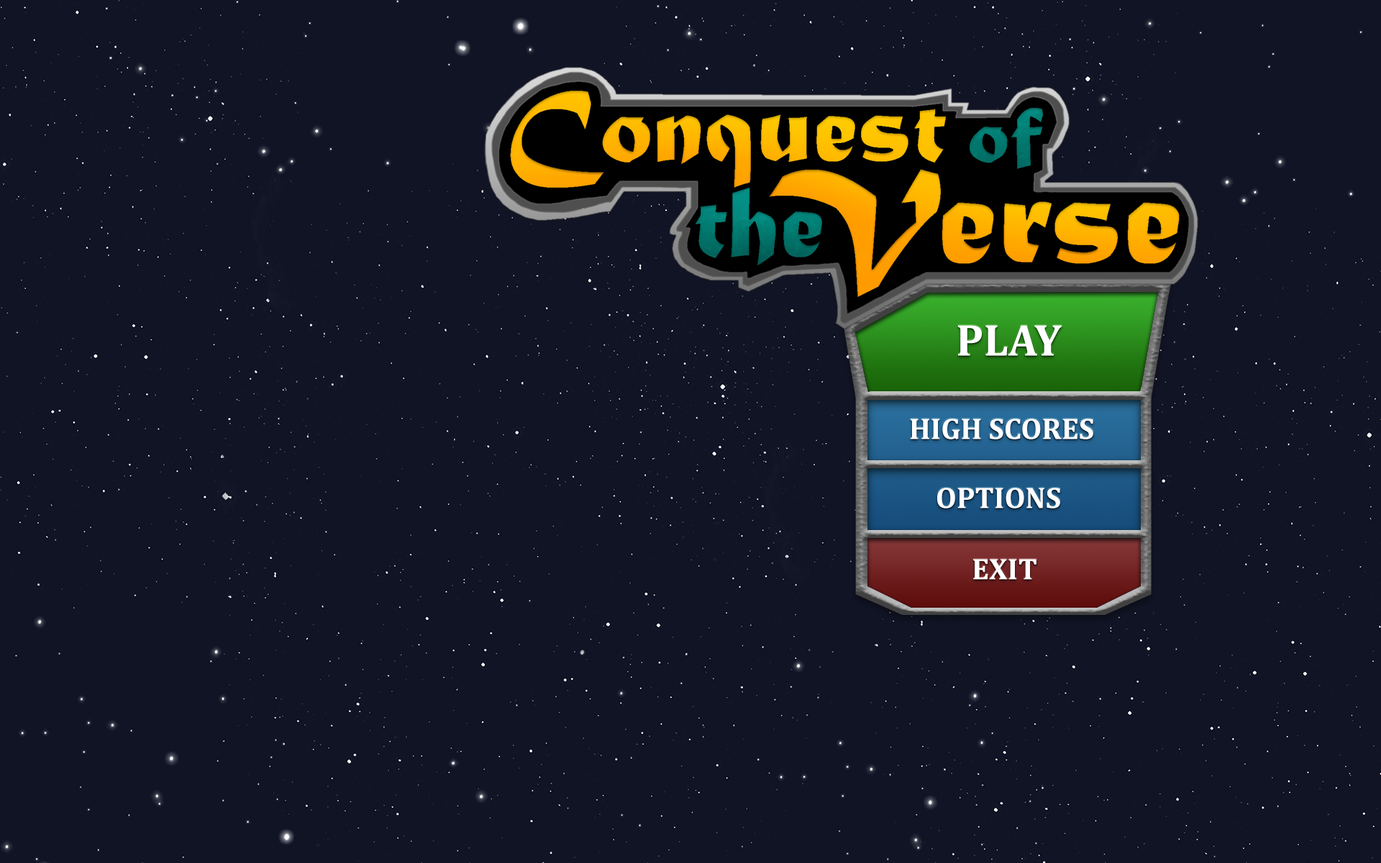
<style>
.page{position:relative;width:1381px;height:863px;background:#111425}
.page>*{position:absolute;margin:0}
.t1{font:45px "Cambria-Bold";color:#ffffff}
.t2{font:30px "Cambria-Bold";color:#ffffff}
</style>
<div class="page">
<p class="t1" style="left:958px;top:325px;width:104px;height:31px">PLAY</p>
<p class="t2" style="left:910px;top:419px;width:184px;height:21px">HIGH SCORES</p>
<p class="t2" style="left:937px;top:488px;width:123px;height:21px">OPTIONS</p>
<p class="t2" style="left:973px;top:559px;width:64px;height:21px">EXIT</p>
</div>
